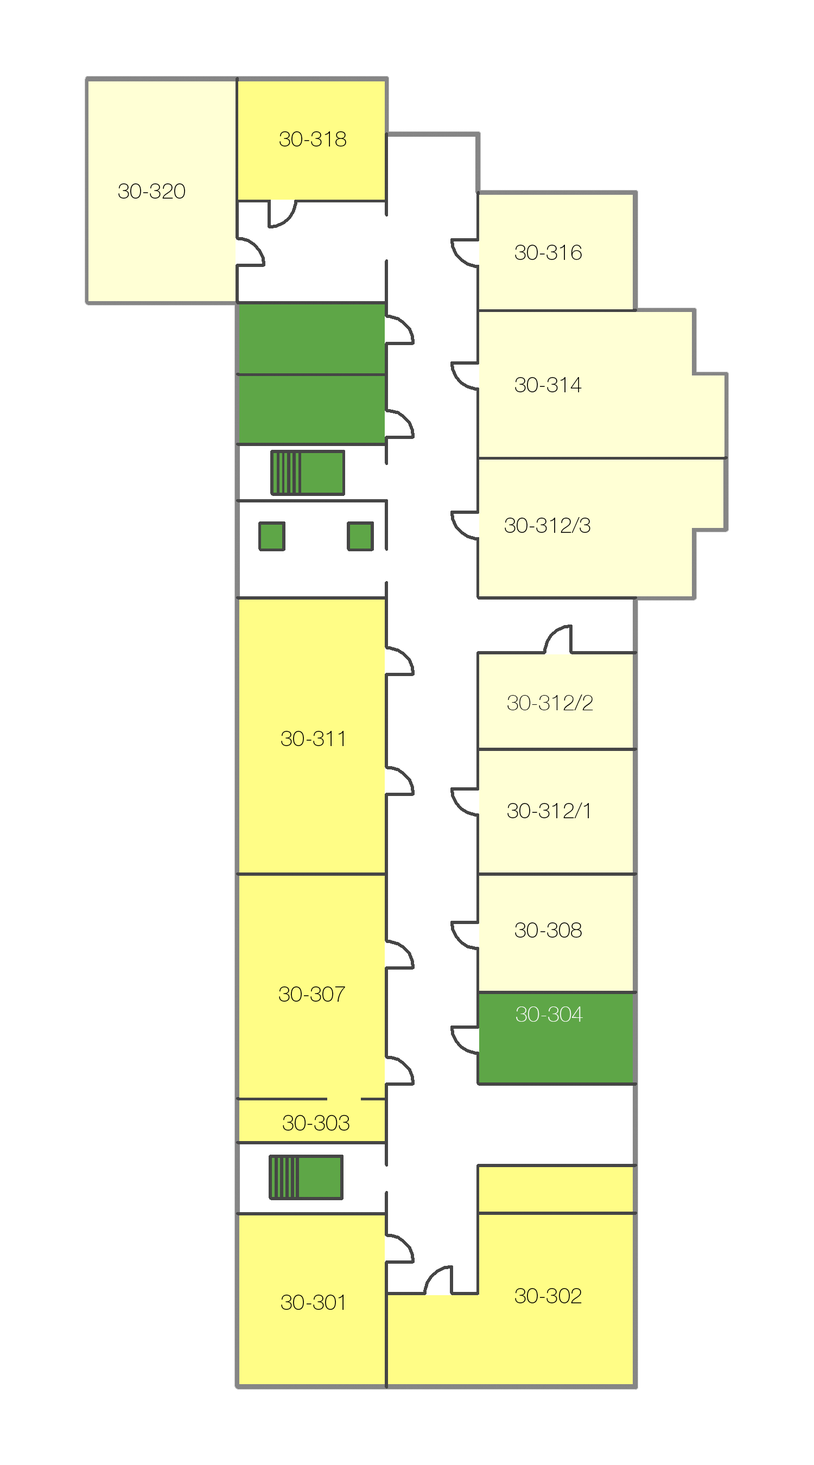
<style>
.page{position:relative;width:814px;height:1465px;background:#ffffff}
.page>*{position:absolute;margin:0}
.t1{font:21.7px "HelveticaNeueCyr-Thin";color:#000000;font-variant:small-caps}
.t2{font:21.7px "HelveticaNeue-Thin";color:#000000;font-variant:small-caps}
.t3{font:21.7px "HelveticaNeue-Thin";color:#ffffff;font-variant:small-caps}
</style>
<div class="page">
<p class="t1" style="left:279px;top:131px;width:67px;height:16px">30-318</p>
<p class="t1" style="left:118px;top:183px;width:67px;height:16px">30-320</p>
<p class="t1" style="left:515px;top:245px;width:67px;height:15px">30-316</p>
<p class="t1" style="left:515px;top:377px;width:67px;height:15px">30-314</p>
<p class="t1" style="left:505px;top:517px;width:85px;height:16px">30-312/3</p>
<p class="t2" style="left:507px;top:695px;width:86px;height:15px">30-312/2</p>
<p class="t1" style="left:281px;top:731px;width:62px;height:15px">30-311</p>
<p class="t1" style="left:507px;top:803px;width:82px;height:15px">30-312/1</p>
<p class="t1" style="left:515px;top:922px;width:67px;height:16px">30-308</p>
<p class="t1" style="left:279px;top:986px;width:66px;height:16px">30-307</p>
<p class="t3" style="left:516px;top:1007px;width:67px;height:15px">30-304</p>
<p class="t1" style="left:283px;top:1115px;width:66px;height:16px">30-303</p>
<p class="t1" style="left:515px;top:1288px;width:67px;height:15px">30-302</p>
<p class="t1" style="left:281px;top:1295px;width:62px;height:15px">30-301</p>
</div>
